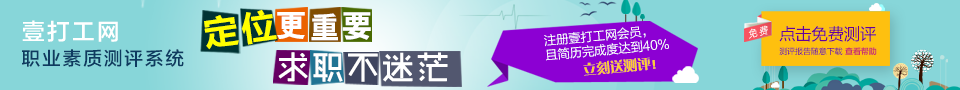
<style>
.page{position:relative;width:960px;height:90px;background:#87d6d9}
.page>*{position:absolute;margin:0}
.t1{font:35.6px "FZLTCHJW--GB1-0";letter-spacing:0.075em;color:#ffff00}
.t2{font:30.6px "RS_CuHei";letter-spacing:0.075em;color:#ffffff}
.t3{font:22.9px "FZLTZHK--GBK1-0";letter-spacing:0.095em;color:#ffffff}
.t4{font:12.5px/14.5px "FZLTHK--GBK1-0";letter-spacing:-0.025em;color:#ffffff}
.t5{font:9.8px "MicrosoftYaHei";scale:0.92 1}
.t6{font:16.2px "MicrosoftYaHei";color:#660099}
.t7{font:18.7px "FZLTZHK--GBK1-0";letter-spacing:0.095em;color:#0e3b60}
.t8{font:32px "RTWSShangGoG0v1-Regular";letter-spacing:0.054em;color:#ffffff;font-weight:bold}
.t9{font:7.9px "MicrosoftYaHei"}
.t10{font:8px "MicrosoftYaHei-Bold";color:#cc3366}
.t11{font:13.9px "FZCQK--GBK1-0";letter-spacing:-0.025em;color:#ffcc33}
</style>
<div class="page">
<p class="t1" style="left:204px;top:15px;width:35px;height:35px;rotate:-8deg">定</p>
<p class="t1" style="left:241px;top:9px;width:36px;height:36px;rotate:-8deg">位</p>
<p class="t2" style="left:277px;top:12px;width:94px;height:29px">更重要</p>
<p class="t3" style="left:22px;top:20px;width:96px;height:22px">壹打工网</p>
<p class="t4" style="left:544px;top:26px;width:125px;height:35px;rotate:-5deg">注册壹打工网会员，<br>且简历完成度达到40%</p>
<p class="t5" style="left:748px;top:25px;width:20px;height:14px;rotate:-13deg">免费</p>
<p class="t6" style="left:779px;top:26px;width:97px;height:16px">点击免费测评</p>
<p class="t7" style="left:22px;top:49px;width:162px;height:18px">职业素质测评系统</p>
<p class="t8" style="left:278px;top:52px;width:170px;height:30px">求职不迷茫</p>
<p class="t9" style="left:779px;top:47px;width:64px;height:8px">测评报告随意下载</p>
<p class="t10" style="left:845px;top:47px;width:32px;height:8px">查看帮助</p>
<p class="t11" style="left:583px;top:57px;width:73px;height:19px;rotate:-5deg">立刻送测评！</p>
</div>
